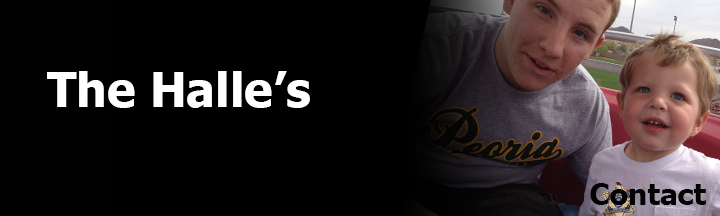
<style>
.page{position:relative;width:720px;height:216px;background:#000000}
.page>*{position:absolute;margin:0}
.t1{font:48px "Tahoma-Bold";color:#ffffff}
.t2{font:30px "Tahoma-Bold";color:#030303}
</style>
<div class="page">
<p class="t1" style="left:47px;top:71px;width:263px;height:37px">The Halle’s</p>
<p class="t2" style="left:590px;top:183px;width:116px;height:22px">Contact</p>
</div>
